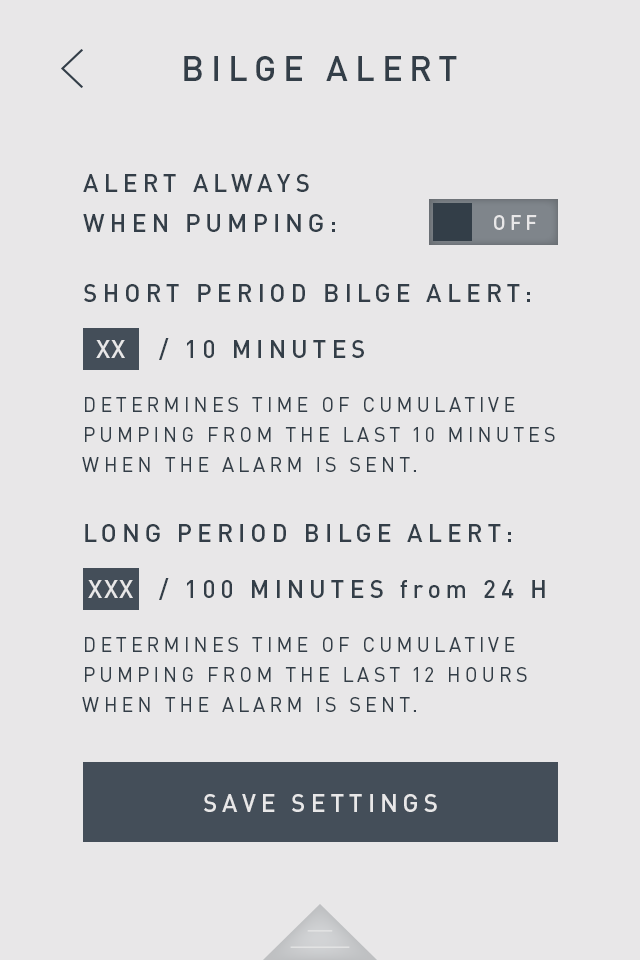
<style>
.page{position:relative;width:640px;height:960px;background:#e8e7e8}
.page>*{position:absolute;margin:0}
.t1{font:35px "DINPro-Medium";letter-spacing:0.2em;color:#333e48}
.t2{font:20px/30px "DINPro";letter-spacing:0.2em;color:#333e48}
.t3{font:25px/70px "DINPro-Medium";letter-spacing:0.2em;color:#333e48}
.t4{font:25px/40px "DINPro-Medium";letter-spacing:0.2em;color:#333e48}
.t5{font:20px/40px "DINPro";letter-spacing:0.2em;color:#333e48}
.t6{font:20.3px "DINPro-Medium";letter-spacing:0.2em;color:#e8e7e8}
.t7{font:25.2px "DINPro-Medium";letter-spacing:0.05em;color:#e8e7e8}
.t8{font:25.2px "DINPro-Medium";letter-spacing:0.2em;color:#333e48}
.t9{font:25.3px/106.3px "DINPro-Medium";letter-spacing:0.2em;color:#dacebe}
.t10{font:25.2px/106.3px "DINPro-Medium";letter-spacing:0.2em;color:#e8e7e8}
.t11{font:25.3px/106.3px "DINPro-Medium";letter-spacing:0.2em;color:#e8e7e8}
</style>
<div class="page">
<p class="t1" style="left:184px;top:56px;width:273px;height:25px">BILGE ALERT</p>
<p class="t2" style="left:82px;top:174px;width:473px;height:538px"><span class="t3">ALERT ALWAYS<br></span><span class="t4">WHEN PUMPING:<br></span><span class="t3">SHORT PERIOD BILGE ALERT:<br><br></span><span class="t5">DETERMINES TIME OF </span>CUMULATIVE PUMPING FROM THE LAST 10 MINUTES WHEN THE ALARM IS SENT.<br><span class="t3">LONG PERIOD BILGE ALERT:<br><br></span><span class="t5">DETERMINES TIME OF </span>CUMULATIVE PUMPING FROM THE LAST 12 HOURS WHEN THE ALARM IS SENT.</p>
<p class="t6" style="left:494px;top:215px;width:43px;height:15px">OFF</p>
<p class="t7" style="left:96px;top:340px;width:29px;height:18px">XX</p>
<p class="t8" style="left:159px;top:338px;width:205px;height:22px">/ 10 MINUTES<br><span class="t9">ISCH</span></p>
<p class="t7" style="left:88px;top:580px;width:45px;height:18px">XXX</p>
<p class="t8" style="left:159px;top:578px;width:386px;height:22px">/ 100 MINUTES from 24 H<br><span class="t9">ISCH</span></p>
<p class="t10" style="left:204px;top:794px;width:233px;height:18px;text-align:center">SAVE SETTINGS<br><span class="t11">ISCH</span></p>
</div>
